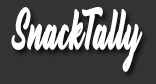
<style>
.page{position:relative;width:156px;height:84px;background:#333333}
.page>*{position:absolute;margin:0}
.t1{font:48px "Bernadette";color:#ffffff;font-weight:bold;scale:0.54 1}
</style>
<div class="page">
<p class="t1" style="left:11px;top:7px;width:132px;height:65px">SnackTally</p>
</div>
